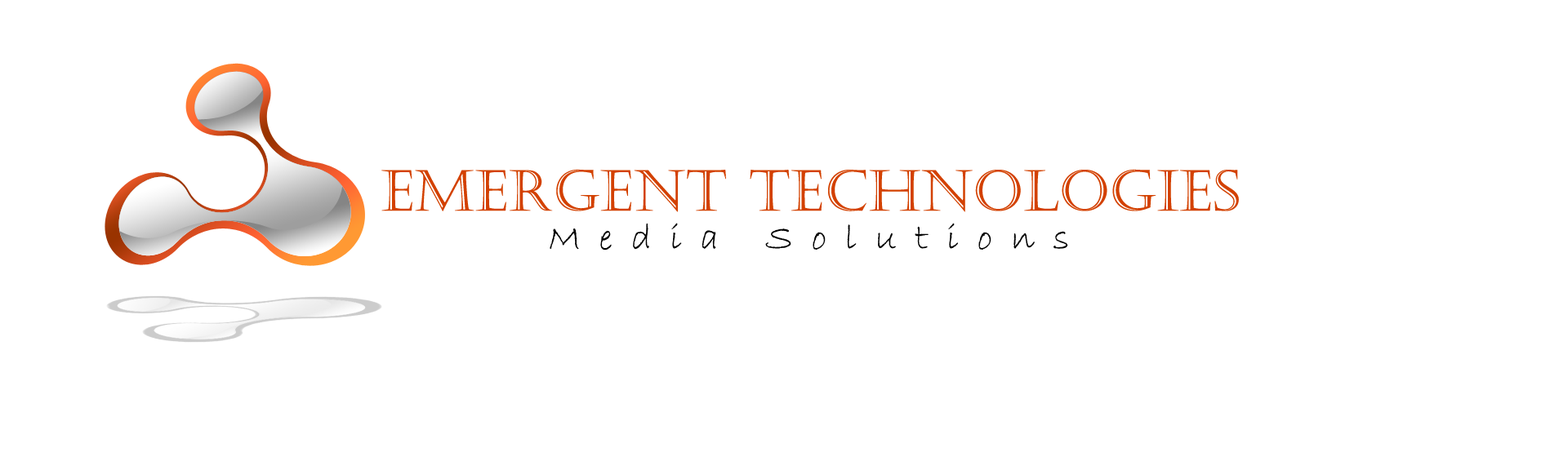
<style>
.page{position:relative;width:1568px;height:470px;background:#ffffff}
.page>*{position:absolute;margin:0}
.t1{font:56.4px "Castellar";letter-spacing:0.02em;color:#d34100}
.t2{font:37.4px "BradleyHandITC";letter-spacing:0.5em;color:#000000}
</style>
<div class="page">
<p class="t1" style="left:381px;top:169px;width:858px;height:43px">Emergent Technologies</p>
<p class="t2" style="left:550px;top:223px;width:518px;height:28px">Media Solutions</p>
</div>
